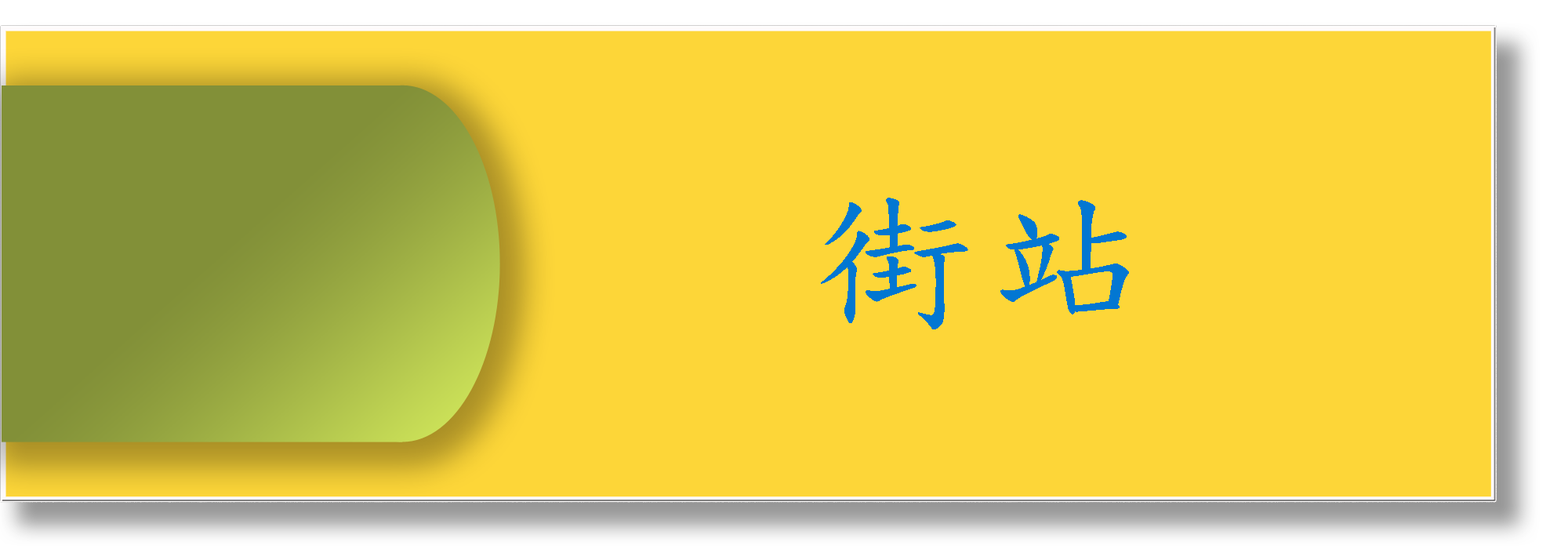
<style>
.page{position:relative;width:1568px;height:549px;background:#fdd638}
.page>*{position:absolute;margin:0}
.t1{font:156.8px "DFKaiShu-SB-Estd-BF";letter-spacing:0.08em;color:#0277d2}
</style>
<div class="page">
<p class="t1" style="left:821px;top:198px;width:308px;height:131px">街站</p>
</div>
